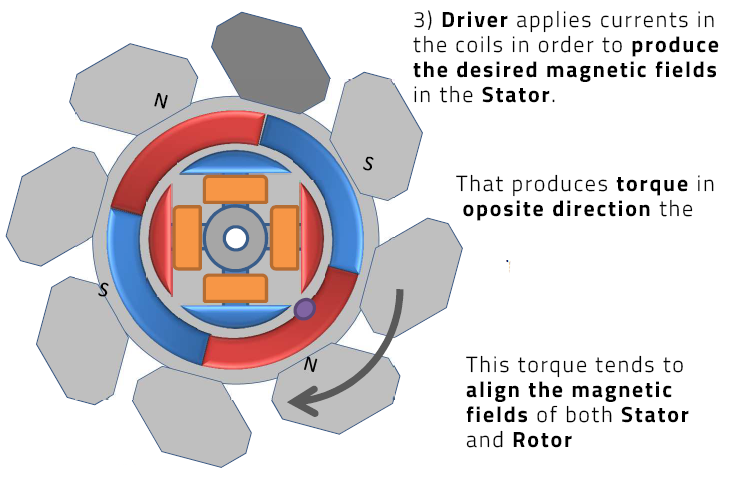
<style>
.page{position:relative;width:729px;height:486px;background:#ffffff}
.page>*{position:absolute;margin:0}
.t1{font:22px/25px "TitilliumWeb-Light";letter-spacing:0.08em;color:#000000}
.t2{font:22px/25px "TitilliumWeb-Bold";letter-spacing:0.08em;color:#000000}
</style>
<div class="page">
<p class="t1" style="left:413px;top:10px;width:306px;height:93px">3) <span class="t2">Driver </span>applies currents in <br>the coils in order to <span class="t2">produce <br>the desired magnetic fields <br></span>in the <span class="t2">Stator</span>.</p>
<p class="t2" style="left:456px;top:174px;width:258px;height:47px"><span class="t1">That produces </span>torque <span class="t1">in <br> </span>oposite direction <span class="t1">the</span></p>
<p class="t2" style="left:466px;top:355px;width:223px;height:93px"><span class="t1">This torque tends to<br></span>align the magnetic<br>fields <span class="t1">of both </span>Stator<br><span class="t1">and </span>Rotor</p>
</div>
